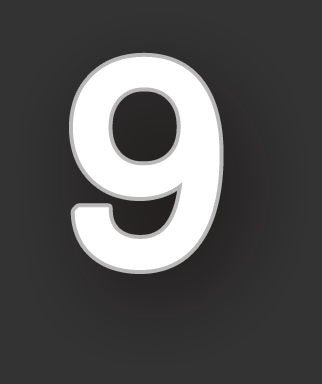
<style>
.page{position:relative;width:322px;height:384px;background:#333333}
.page>*{position:absolute;margin:0}
.t1{font:285.3px "Swiss721BT-Roman";color:#ffffff;font-weight:bold}
</style>
<div class="page">
<p class="t1" style="left:73px;top:56px;width:147px;height:214px">9</p>
</div>
